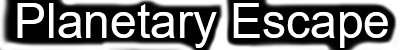
<style>
.page{position:relative;width:400px;height:50px;background:#010101}
.page>*{position:absolute;margin:0}
.t1{font:48px "ArialMT";color:#ffffff}
</style>
<div class="page">
<p class="t1" style="left:17px;top:3px;width:371px;height:45px">Planetary Escape</p>
</div>
